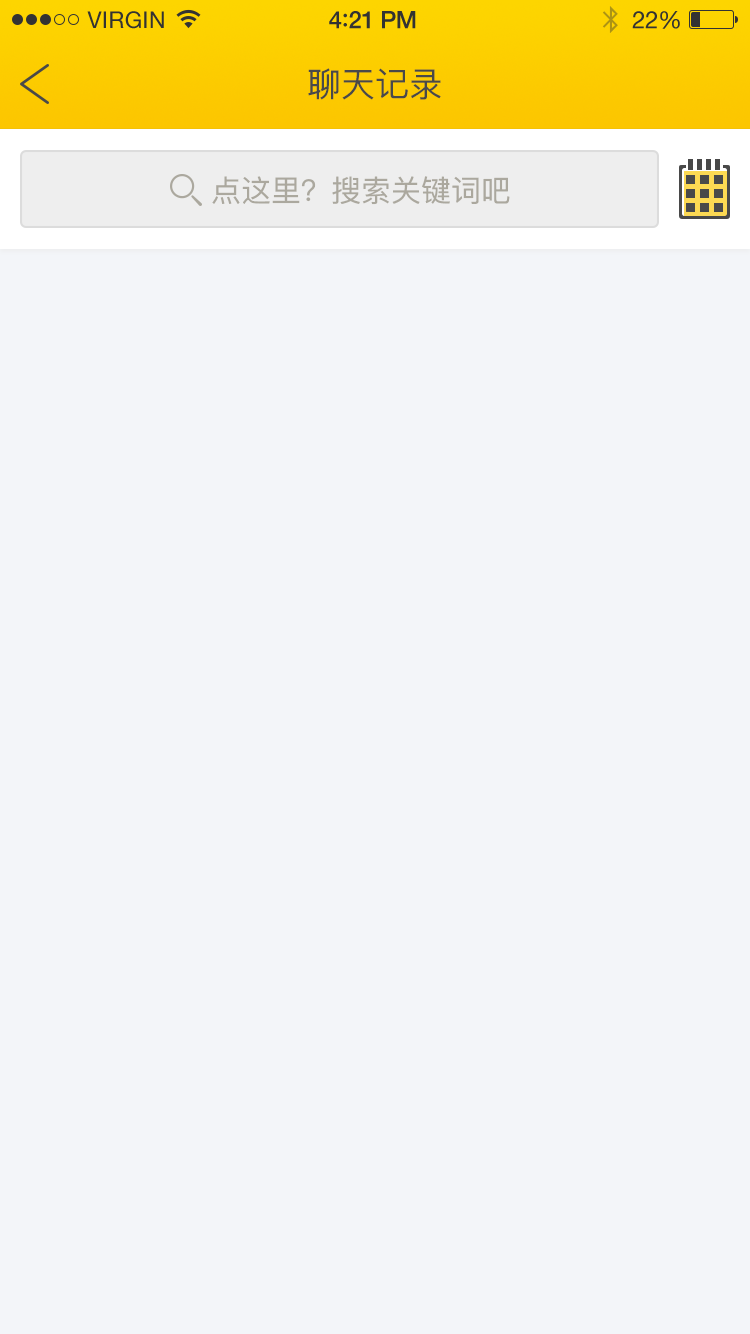
<style>
.page{position:relative;width:750px;height:1334px;background:#f3f5f9}
.page>*{position:absolute;margin:0}
.t1{font:23px "HelveticaNeue";letter-spacing:0.02em;color:#333333}
.t2{font:24px "HelveticaNeue-Medium";letter-spacing:-0.02em;color:#333333}
.t3{font:26px "Avenir-Medium";letter-spacing:-0.02em;color:#333333}
.t4{font:24px "HelveticaNeue";letter-spacing:-0.02em;color:#333333}
.t5{font:34px "PingFangSC-Regular";color:#494949}
.t6{font:30px "PingFangSC-Regular";color:#aba89e}
</style>
<div class="page">
<p class="t1" style="left:87px;top:11px;width:77px;height:18px">VIRGIN</p>
<p class="t2" style="left:329px;top:11px;width:87px;height:18px">4<span class="t3">:</span>21 PM</p>
<p class="t4" style="left:632px;top:11px;width:48px;height:18px">22%</p>
<p class="t5" style="left:308px;top:68px;width:133px;height:32px">聊天记录</p>
<p class="t6" style="left:212px;top:176px;width:298px;height:29px">点这里？搜索关键词吧</p>
</div>
